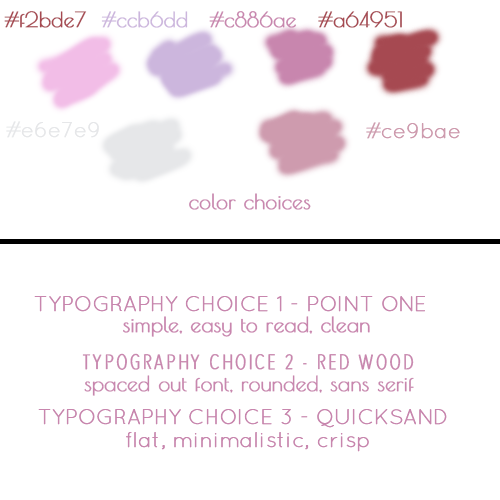
<style>
.page{position:relative;width:500px;height:500px;background:#ffffff}
.page>*{position:absolute;margin:0}
.t1{font:20.8px "PoiretOne-Regular";color:#a64951;font-weight:bold}
.t2{font:20.8px "PoiretOne-Regular";color:#ccb6dd;font-weight:bold}
.t3{font:20.8px "PoiretOne-Regular";color:#c886ae;font-weight:bold}
.t4{font:20.8px "Quicksand-Light";color:#e6e7e9;font-weight:bold}
.t5{font:20.8px "PoiretOne-Regular";color:#e6e7e9;font-weight:bold}
.t6{font:20.8px "Quicksand-Light";color:#ce9bae;font-weight:bold}
.t7{font:20.8px "PoiretOne-Regular";color:#ce9bae;font-weight:bold}
.t8{font:20.8px "RedWood";color:#c886ae;font-weight:bold}
.t9{font:20.8px "Quicksand-Light";color:#c886ae;font-weight:bold}
</style>
<div class="page">
<p class="t1" style="left:4px;top:11px;width:83px;height:17px">#f2bde7</p>
<p class="t2" style="left:101px;top:11px;width:87px;height:17px">#ccb6dd</p>
<p class="t3" style="left:209px;top:11px;width:87px;height:17px">#c886ae</p>
<p class="t1" style="left:318px;top:11px;width:84px;height:17px">#a64951</p>
<p class="t4" style="left:6px;top:121px;width:93px;height:17px"><span class="t5">#</span>e6e7e9</p>
<p class="t6" style="left:366px;top:122px;width:94px;height:17px">#<span class="t7">#</span>ce9bae</p>
<p class="t3" style="left:189px;top:193px;width:122px;height:17px">color choices</p>
<p class="t8" style="left:82px;top:353px;width:332px;height:17px">TYPOGRAPHY CHOICE 2 - RED WOOD</p>
<p class="t3" style="left:84px;top:375px;width:330px;height:21px">spaced out font, rounded, sans serif</p>
<p class="t9" style="left:38px;top:409px;width:409px;height:19px">TYPOGRAPHY CHOICE 3 - QUICKSAND</p>
<p class="t9" style="left:126px;top:432px;width:243px;height:20px">flat, minimalistic, crisp</p>
</div>
